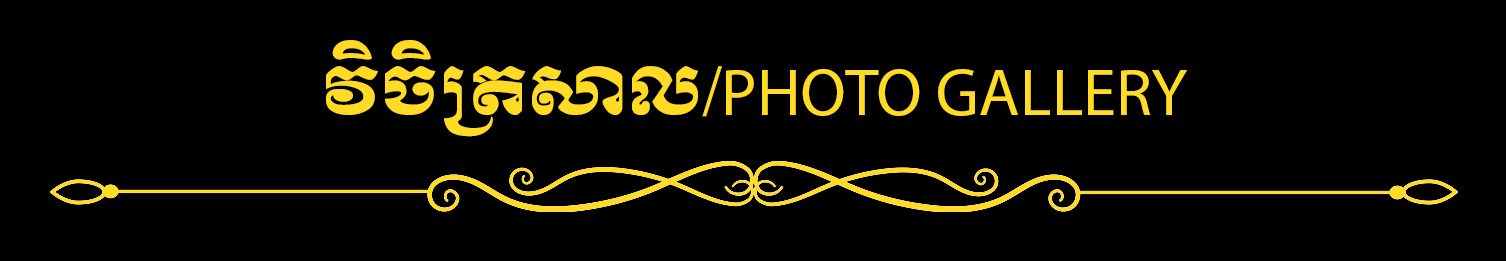
<style>
.page{position:relative;width:1506px;height:261px;background:#000000}
.page>*{position:absolute;margin:0}
.t1{font:66.8px "MyriadPro-Regular";color:#ffdb26}
.t2{font:66.8px "KhmerOSMoul";color:#ffdb26}
</style>
<div class="page">
<p class="t1" style="left:326px;top:40px;width:861px;height:97px"><span class="t2">វិចិត្រសាល/</span>PHOTO GALLERY</p>
</div>
